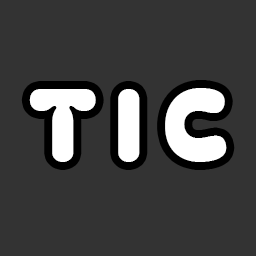
<style>
.page{position:relative;width:256px;height:256px;background:#333333}
.page>*{position:absolute;margin:0}
.t1{font:100px "BagelFatOne-Regular";letter-spacing:0.2em;color:#ffffff}
</style>
<div class="page">
<p class="t1" style="left:29px;top:88px;width:198px;height:74px">TIC</p>
</div>
